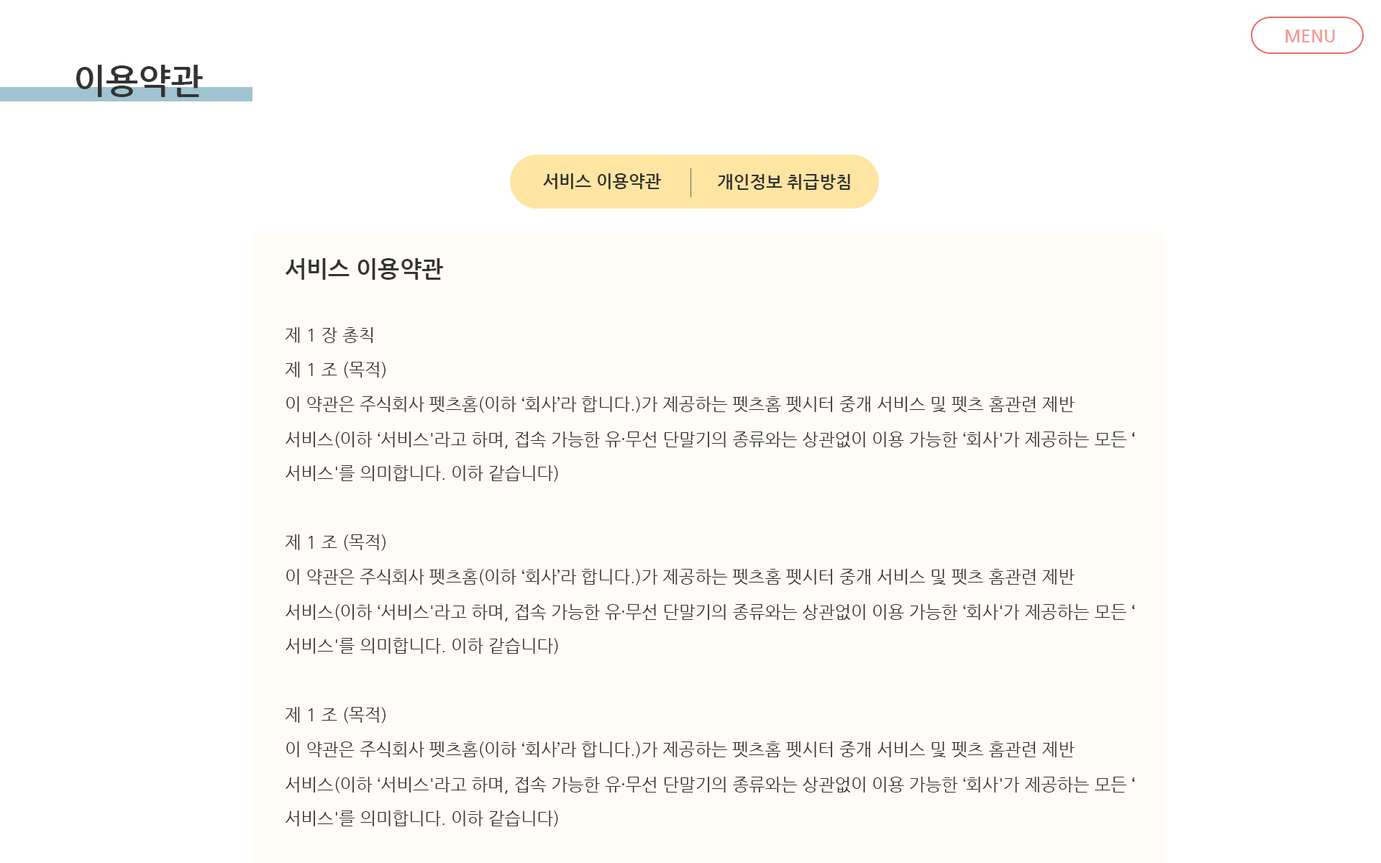
<style>
.page{position:relative;width:1381px;height:863px;background:#ffffff}
.page>*{position:absolute;margin:0}
.t1{font:17.3px "NanumGothicBold";color:#f59892}
.t2{font:34.5px "NanumGothicBold";color:#333333}
.t3{font:17.3px "NanumGothicBold";color:#333333}
.t4{font:17.3px/34.5px "NanumGothic";color:#333333}
.t5{font:23px/34.5px "NanumGothicBold";color:#333333}
.t6{font:17.3px/34.5px "Gulim";color:#333333}
.t7{font:17.3px/34.5px "NanumGothicBold";color:#333333}
</style>
<div class="page">
<p class="t1" style="left:1286px;top:29px;width:49px;height:13px">MENU</p>
<p class="t2" style="left:76px;top:65px;width:127px;height:32px">이용약관</p>
<p class="t3" style="left:543px;top:173px;width:118px;height:16px">서비스 이용약관</p>
<p class="t3" style="left:718px;top:174px;width:132px;height:16px">개인정보 취급방침</p>
<p class="t4" style="left:285px;top:258px;width:850px;height:569px"><span class="t5">서비스 이용약관<br><br></span>제 1 장 총칙<br>제 1 조 (목적)<br>이 약관은 주식회사 펫츠홈(이하 ‘회사’라 합니다.)가 제공하는 펫츠홈 펫시터 중개 서비스 및 펫츠 홈관련 제반 서비스(이하 ‘서비스'라고 하며, 접속 가능한 유<span class="t6">∙</span>무선 단말기의 종류와는 상관없이 이용 가능한 ‘회사'가 제공하는 모든 <span class="t7">‘</span>서비스'를 의미합니다. 이하 같습니다)<br><br>제 1 조 (목적)<br>이 약관은 주식회사 펫츠홈(이하 ‘회사’라 합니다.)가 제공하는 펫츠홈 펫시터 중개 서비스 및 펫츠 홈관련 제반 서비스(이하 ‘서비스'라고 하며, 접속 가능한 유<span class="t6">∙</span>무선 단말기의 종류와는 상관없이 이용 가능한 ‘회사'가 제공하는 모든 <span class="t7">‘</span>서비스'를 의미합니다. 이하 같습니다)<br><br>제 1 조 (목적)<br>이 약관은 주식회사 펫츠홈(이하 ‘회사’라 합니다.)가 제공하는 펫츠홈 펫시터 중개 서비스 및 펫츠 홈관련 제반 서비스(이하 ‘서비스'라고 하며, 접속 가능한 유<span class="t6">∙</span>무선 단말기의 종류와는 상관없이 이용 가능한 ‘회사'가 제공하는 모든 <span class="t7">‘</span>서비스'를 의미합니다. 이하 같습니다)</p>
</div>
